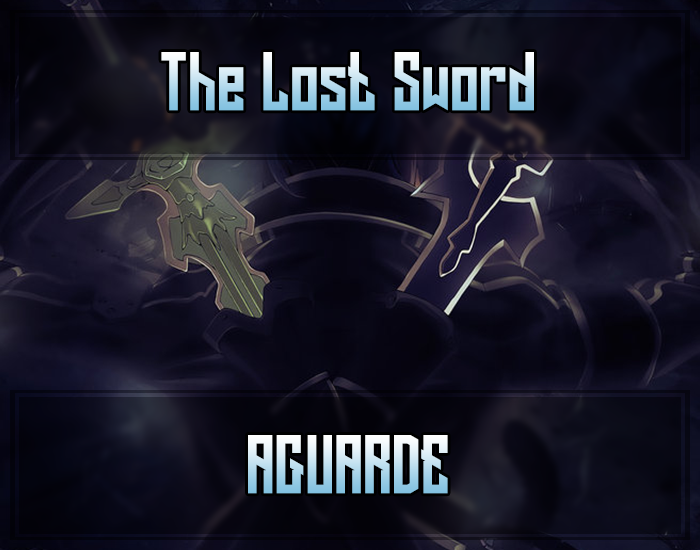
<style>
.page{position:relative;width:700px;height:550px}
.page>*{position:absolute;margin:0}
.t1{font:75px "LongShot"}
</style>
<div class="page">
<p class="t1" style="left:161px;top:52px;width:373px;height:59px">The Lost Sword</p>
<p class="t1" style="left:248px;top:435px;width:200px;height:59px">AGUARDE</p>
</div>
